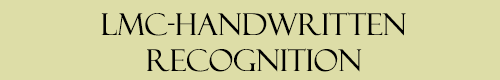
<style>
.page{position:relative;width:500px;height:80px;background:#dddda7}
.page>*{position:absolute;margin:0}
.t1{font:30px "FelixTitlingMT";color:#000000}
</style>
<div class="page">
<p class="t1" style="left:101px;top:12px;width:305px;height:60px;text-align:center">lmc-handwritten<br>recognition</p>
</div>
